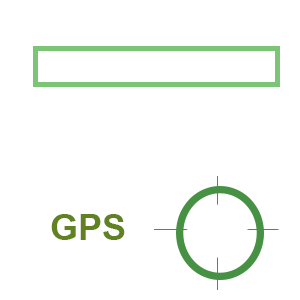
<style>
.page{position:relative;width:300px;height:300px;background:#ffffff}
.page>*{position:absolute;margin:0}
.t1{font:36px "Arial-BoldMT";color:#608220}
</style>
<div class="page">
<p class="t1" style="left:51px;top:214px;width:74px;height:26px">GPS</p>
</div>
